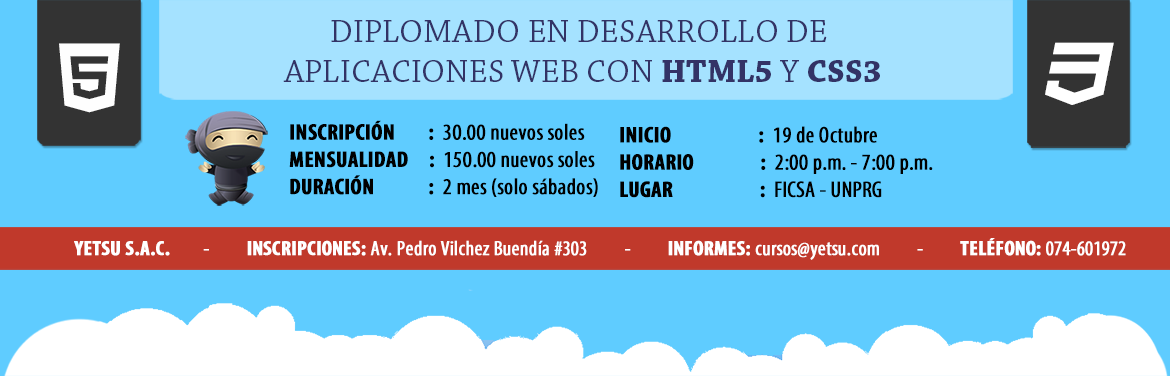
<style>
.page{position:relative;width:1170px;height:376px;background:#5fccff}
.page>*{position:absolute;margin:0}
.t1{font:33px "ChaparralPro-Regular";letter-spacing:0.005em;color:#333366}
.t2{font:33px "ChaparralPro-Bold";letter-spacing:0.005em;color:#333366}
.t3{font:68.8px "fiori";letter-spacing:0.005em;color:#fefefe}
.t4{font:68.8px "fiori";letter-spacing:0.005em;color:#ffffff}
.t5{font:22.7px/27.3px "MyriadPro-BoldCond";color:#000000;font-weight:bold}
.t6{font:22.7px/27.3px "MyriadPro-Cond";color:#000000;font-weight:bold}
.t7{font:20.7px "MyriadPro-Cond";color:#ffffff;font-weight:bold}
.t8{font:20.7px "MyriadPro-BoldCond";color:#ffffff;font-weight:bold}
</style>
<div class="page">
<p class="t1" style="left:283px;top:20px;width:597px;height:62px;text-align:center">DIPLOMADO EN DESARROLLO DE <br>APLICACIONES WEB CON <span class="t2">HTML5</span> Y <span class="t2">CSS3</span></p>
<p class="t3" style="left:59px;top:43px;width:61px;height:70px">!</p>
<p class="t4" style="left:1045px;top:42px;width:69px;height:63px">#</p>
<p class="t5" style="left:289px;top:120px;width:309px;height:77px">INSCRIPCIÓN        :  <span class="t6">30.00 nuevos soles<br></span>MENSUALIDAD     : <span class="t6"> 150.00 nuevos soles</span> <br>DURACIÓN             : <span class="t6"> 2 mes (solo sábados)</span></p>
<p class="t5" style="left:620px;top:126px;width:313px;height:72px">INICIO                     : <span class="t6"> 19 de Octubre<br></span>HORARIO                : <span class="t6"> 2:00 p.m. - 7:00 p.m.<br></span>LUGAR                     :  <span class="t6">FICSA - UNPRG</span></p>
<p class="t7" style="left:74px;top:238px;width:1052px;height:22px"><span class="t8">YETSU S.A.C.</span>        -         <span class="t8">INSCRIPCIONES: </span>Av. Pedro Vilchez Buendía #303         -         <span class="t8">INFORMES: </span>cursos@yetsu.com         -         <span class="t8">TELÉFONO: </span>074-601972</p>
</div>
